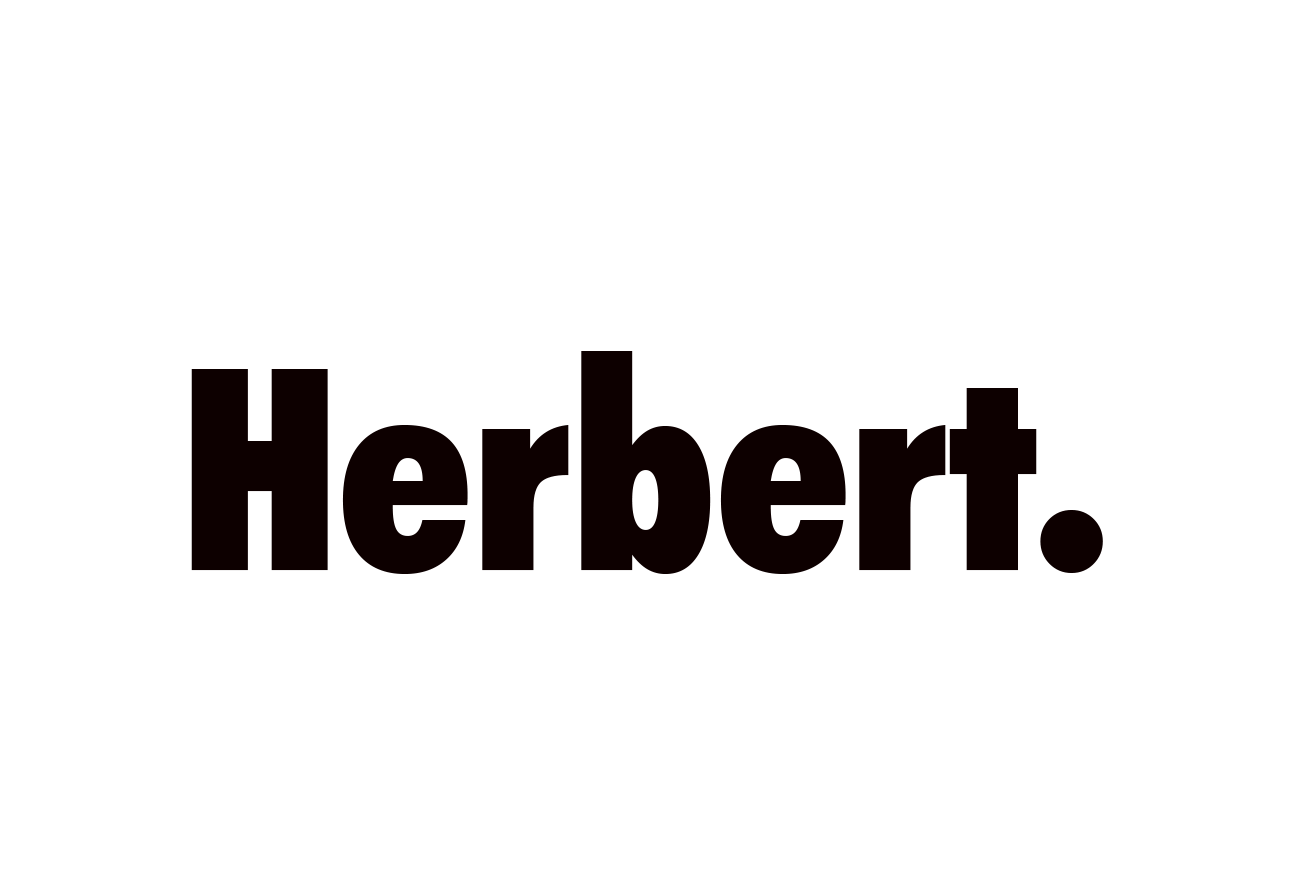
<style>
.page{position:relative;width:1290px;height:882px;background:#ffffff}
.page>*{position:absolute;margin:0}
.t1{font:281.2px "FuturaBT-ExtraBlackCondensed";color:#0d0000}
</style>
<div class="page">
<p class="t1" style="left:191px;top:351px;width:912px;height:223px">Herbert.</p>
</div>
